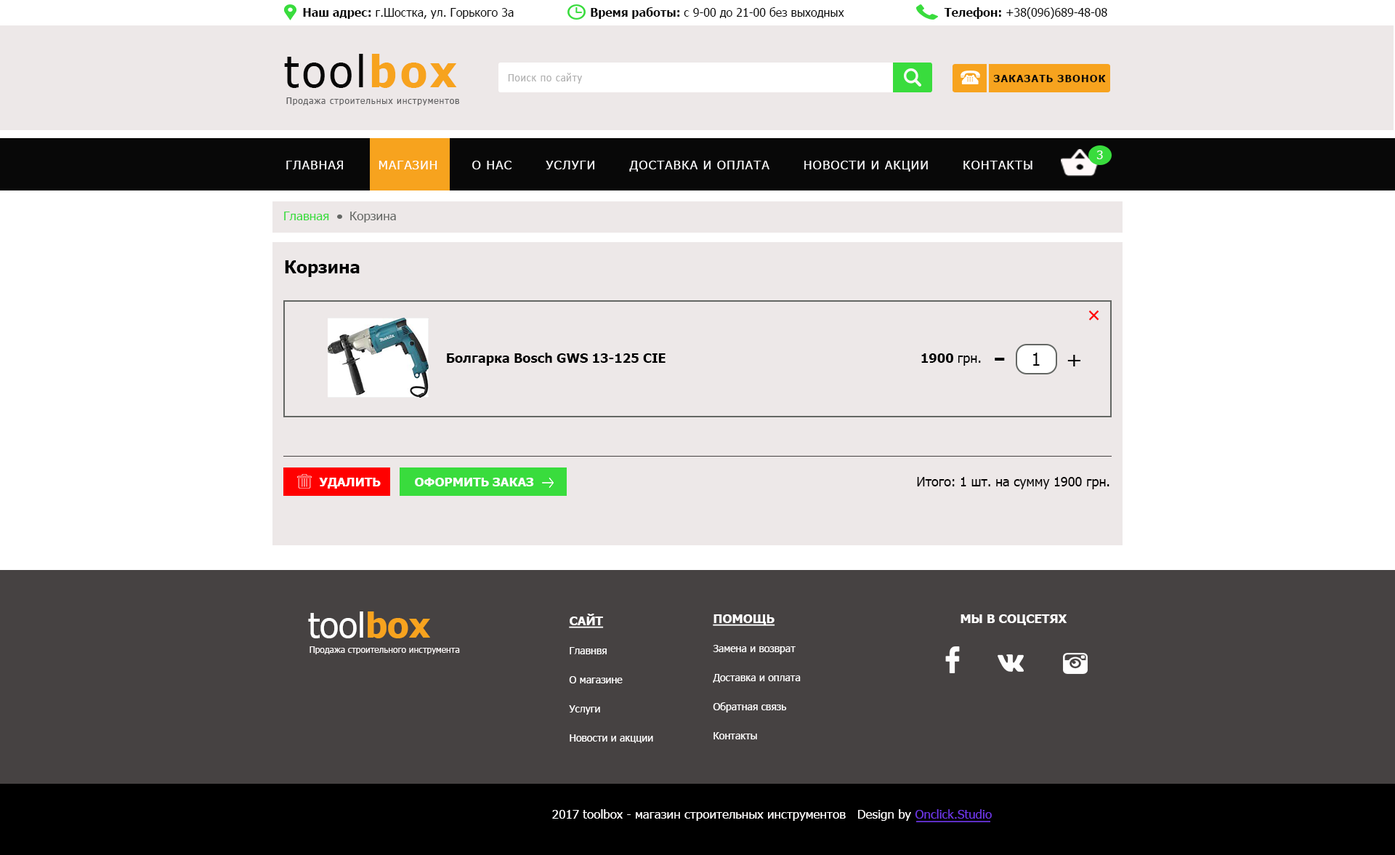
<style>
.page{position:relative;width:1395px;height:855px;background:#ede8e8}
.page>*{position:absolute;margin:0}
.t1{font:11.6px "Tahoma";color:#080808}
.t2{font:11.6px "Tahoma-Bold";color:#080808}
.t3{font:43.6px "Tahoma";letter-spacing:0.075em;color:#080808}
.t4{font:43.6px "Tahoma-Bold";letter-spacing:0.075em;color:#f7a31e}
.t5{font:10.2px "Tahoma";letter-spacing:0.075em;color:#b1b1b1;scale:0.92 1}
.t6{font:10.2px "Tahoma-Bold";letter-spacing:0.075em;color:#080808;text-transform:uppercase}
.t7{font:8.7px "Tahoma";letter-spacing:0.075em;color:#5f5f60}
.t8{font:12.4px "Tahoma";letter-spacing:0.075em;color:#fafafb;text-transform:uppercase}
.t9{font:12.4px "Tahoma";letter-spacing:0.075em;color:#ffffff;text-transform:uppercase}
.t10{font:12.4px "Tahoma";color:#39dc3d}
.t11{font:12.4px "Tahoma";color:#646764}
.t12{font:17.4px "Tahoma-Bold";color:#000000}
.t13{font:21.8px "Tahoma";color:#ff0000}
.t14{font:13.1px "Tahoma-Bold";color:#000000}
.t15{font:13.1px "Tahoma";color:#000000}
.t16{font:17.4px "Tahoma";color:#000000}
.t17{font:34.9px "Tahoma";color:#000000}
.t18{font:21.8px "Tahoma";color:#000000}
.t19{font:12.4px "Tahoma-Bold";color:#fffdfd;text-transform:uppercase}
.t20{font:13.1px "Tahoma";color:#020000}
.t21{font:34.9px "Tahoma";color:#fffefe}
.t22{font:34.9px "Tahoma-Bold";color:#f7a31e}
.t23{font:10.2px/14.5px "Tahoma";color:#fffefe}
.t24{font:12.4px/14.5px "Tahoma-Bold";color:#fffefe;text-transform:uppercase;text-decoration:underline}
.t25{font:12.4px "Tahoma-Bold";color:#fffefe;text-transform:uppercase}
.t26{font:8.7px "Tahoma";color:#fbf7f7}
.t27{font:12.4px "Tahoma";color:#fffefe}
.t28{font:12.4px "Tahoma";color:#6c37e3}
</style>
<div class="page">
<p class="t1" style="left:303px;top:8px;width:211px;height:11px"><span class="t2">Наш адрес:</span> г.Шостка, ул. Горького 3а</p>
<p class="t1" style="left:591px;top:7px;width:253px;height:12px"><span class="t2">Время работы: </span>с 9-00 до 21-00 без выходных</p>
<p class="t1" style="left:944px;top:7px;width:164px;height:12px"><span class="t2">Телефон: </span>+38(096)689-48-08</p>
<p class="t3" style="left:284px;top:54px;width:173px;height:34px">tool<span class="t4">box</span></p>
<p class="t5" style="left:508px;top:73px;width:74px;height:11px">Поиск по сайту</p>
<p class="t6" style="left:993px;top:75px;width:113px;height:7px">Заказать звонок</p>
<p class="t7" style="left:286px;top:97px;width:173px;height:8px">Продажа строительных инструментов</p>
<p class="t8" style="left:286px;top:161px;width:747px;height:11px">Главная       <span class="t9">Магазин</span>       О нас       Услуги       Доставка и оплата       Новости и акции       Контакты</p>
<p class="t8" style="left:1097px;top:150px;width:6px;height:9px">3</p>
<p class="t10" style="left:284px;top:211px;width:45px;height:9px">Главная</p>
<p class="t11" style="left:350px;top:211px;width:46px;height:11px">Корзина</p>
<p class="t12" style="left:285px;top:260px;width:75px;height:17px">Корзина</p>
<p class="t13" style="left:1089px;top:310px;width:11px;height:10px;rotate:44deg">+</p>
<p class="t14" style="left:447px;top:352px;width:219px;height:14px">Болгарка Bosch GWS 13-125 CIE</p>
<p class="t14" style="left:921px;top:353px;width:60px;height:13px">1900 <span class="t15">грн.</span></p>
<p class="t16" style="left:1033px;top:352px;width:7px;height:14px">1</p>
<p class="t17" style="left:995px;top:358px;width:10px;height:2px">-</p>
<p class="t18" style="left:1068px;top:355px;width:13px;height:11px">+</p>
<p class="t19" style="left:319px;top:477px;width:62px;height:11px">Удалить</p>
<p class="t19" style="left:415px;top:477px;width:119px;height:9px">Оформить заказ</p>
<p class="t20" style="left:917px;top:477px;width:193px;height:12px">Итого: 1 шт. на сумму 1900 грн.</p>
<p class="t21" style="left:308px;top:611px;width:122px;height:27px">tool<span class="t22">box</span></p>
<p class="t23" style="left:569px;top:613px;width:84px;height:130px"><span class="t24">сайт<br><br></span>Главнвя<br><br>О магазине<br><br>Услуги<br><br>Новости и акцции</p>
<p class="t23" style="left:713px;top:614px;width:88px;height:125px"><span class="t24">Помощь<br><br></span>Замена и возврат<br><br>Доставка и оплата<br><br>Обратная связь<br><br>Контакты</p>
<p class="t25" style="left:961px;top:614px;width:107px;height:11px">Мы в соцсетях</p>
<p class="t26" style="left:310px;top:646px;width:150px;height:8px">Продажа строительного инструмента</p>
<p class="t27" style="left:552px;top:809px;width:440px;height:11px">2017 toolbox - магазин строительных инструментов   Design by <span class="t28">Onclick.Studio</span></p>
</div>
